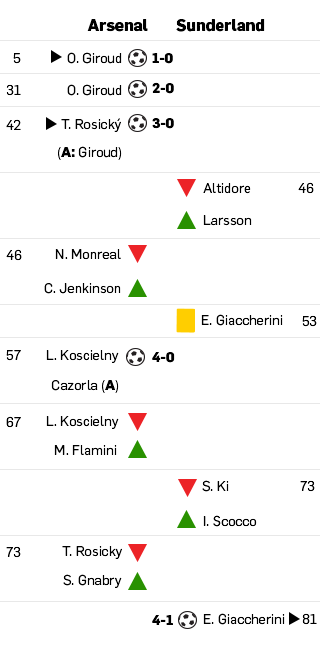
<style>
.page{position:relative;width:320px;height:648px;background:#ffffff}
.page>*{position:absolute;margin:0}
.t1{font:16px "Flama-Bold";color:#000000}
.t2{font:14px "Flama-Book";color:#000000}
.t3{font:14px "Flama-Bold";color:#000000}
</style>
<div class="page">
<p class="t1" style="left:87px;top:19px;width:61px;height:13px">Arsenal</p>
<p class="t1" style="left:176px;top:19px;width:89px;height:13px">Sunderland</p>
<p class="t2" style="left:13px;top:53px;width:8px;height:11px">5</p>
<p class="t2" style="left:67px;top:52px;width:55px;height:12px">O. Giroud</p>
<p class="t3" style="left:152px;top:53px;width:21px;height:11px">1-0</p>
<p class="t2" style="left:6px;top:84px;width:15px;height:12px">31</p>
<p class="t2" style="left:67px;top:84px;width:55px;height:12px">O. Giroud</p>
<p class="t3" style="left:152px;top:82px;width:22px;height:12px">2-0</p>
<p class="t2" style="left:6px;top:119px;width:15px;height:11px">42</p>
<p class="t2" style="left:61px;top:118px;width:60px;height:14px">T. Rosický</p>
<p class="t3" style="left:152px;top:118px;width:22px;height:11px">3-0</p>
<p class="t2" style="left:58px;top:146px;width:64px;height:14px">(<span class="t3">A: </span>Giroud)</p>
<p class="t2" style="left:203px;top:183px;width:48px;height:11px">Altidore</p>
<p class="t2" style="left:298px;top:182px;width:16px;height:12px">46</p>
<p class="t2" style="left:203px;top:215px;width:49px;height:11px">Larsson</p>
<p class="t2" style="left:6px;top:249px;width:16px;height:12px">46</p>
<p class="t2" style="left:55px;top:249px;width:66px;height:11px">N. Monreal</p>
<p class="t2" style="left:44px;top:283px;width:77px;height:11px">C. Jenkinson</p>
<p class="t2" style="left:201px;top:314px;width:82px;height:12px">E. Giaccherini</p>
<p class="t2" style="left:302px;top:315px;width:15px;height:12px">53</p>
<p class="t2" style="left:6px;top:350px;width:15px;height:11px">57</p>
<p class="t2" style="left:46px;top:350px;width:73px;height:13px">L. Koscielny</p>
<p class="t3" style="left:152px;top:352px;width:23px;height:11px">4-0</p>
<p class="t2" style="left:51px;top:380px;width:68px;height:13px">Cazorla (<span class="t3">A</span>)</p>
<p class="t2" style="left:6px;top:416px;width:15px;height:12px">67</p>
<p class="t2" style="left:46px;top:416px;width:73px;height:13px">L. Koscielny</p>
<p class="t2" style="left:54px;top:445px;width:63px;height:11px">M. Flamini</p>
<p class="t2" style="left:202px;top:480px;width:27px;height:12px">S. Ki</p>
<p class="t2" style="left:300px;top:480px;width:15px;height:12px">73</p>
<p class="t2" style="left:203px;top:515px;width:54px;height:12px">I. Scocco</p>
<p class="t2" style="left:6px;top:546px;width:15px;height:12px">73</p>
<p class="t2" style="left:62px;top:546px;width:60px;height:13px">T. Rosicky</p>
<p class="t2" style="left:63px;top:574px;width:59px;height:14px">S. Gnabry</p>
<p class="t3" style="left:152px;top:615px;width:21px;height:10px">4-1</p>
<p class="t2" style="left:203px;top:613px;width:82px;height:12px">E. Giaccherini</p>
<p class="t2" style="left:302px;top:613px;width:15px;height:12px">81</p>
</div>
